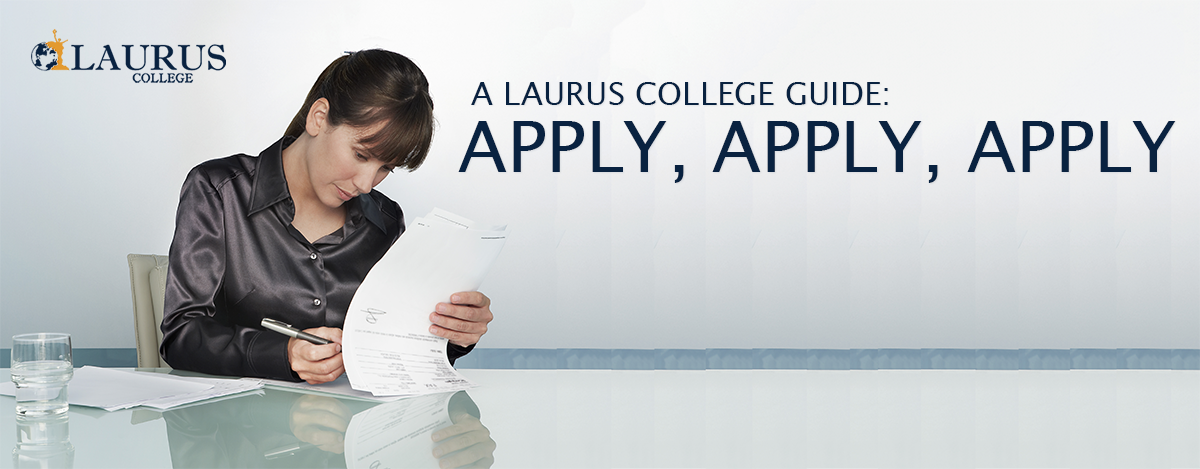
<style>
.page{position:relative;width:1200px;height:469px}
.page>*{position:absolute;margin:0}
.t1{font:32.2px "LucidaSans";color:#092240;text-transform:uppercase}
.t2{font:71px "LucidaSans";color:#092240;text-transform:uppercase}
</style>
<div class="page">
<p class="t1" style="left:471px;top:82px;width:417px;height:23px">A Laurus College Guide:</p>
<p class="t2" style="left:458px;top:121px;width:718px;height:62px">Apply, Apply, Apply</p>
</div>
